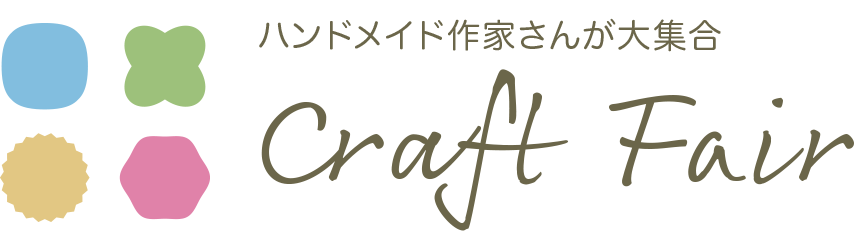
<style>
.page{position:relative;width:867px;height:237px;background:#ffffff}
.page>*{position:absolute;margin:0}
.t1{font:33.6px "HiraMaruProN-W4";letter-spacing:0.05em;color:#6b664a}
.t2{font:133.5px "Rollerscript-Smooth";letter-spacing:0.05em;color:#6b664a}
</style>
<div class="page">
<p class="t1" style="left:259px;top:18px;width:462px;height:34px">ハンドメイド作家さんが大集合</p>
<p class="t2" style="left:261px;top:69px;width:593px;height:162px">Craft Fair</p>
</div>
